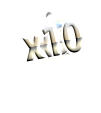
<style>
.page{position:relative;width:101px;height:113px;background:#ffffff}
.page>*{position:absolute;margin:0}
.t1{font:48.3px "MyriadPro-BoldCond"}
</style>
<div class="page">
<p class="t1" style="left:22px;top:20px;width:61px;height:42px;rotate:-11deg">x10</p>
</div>
